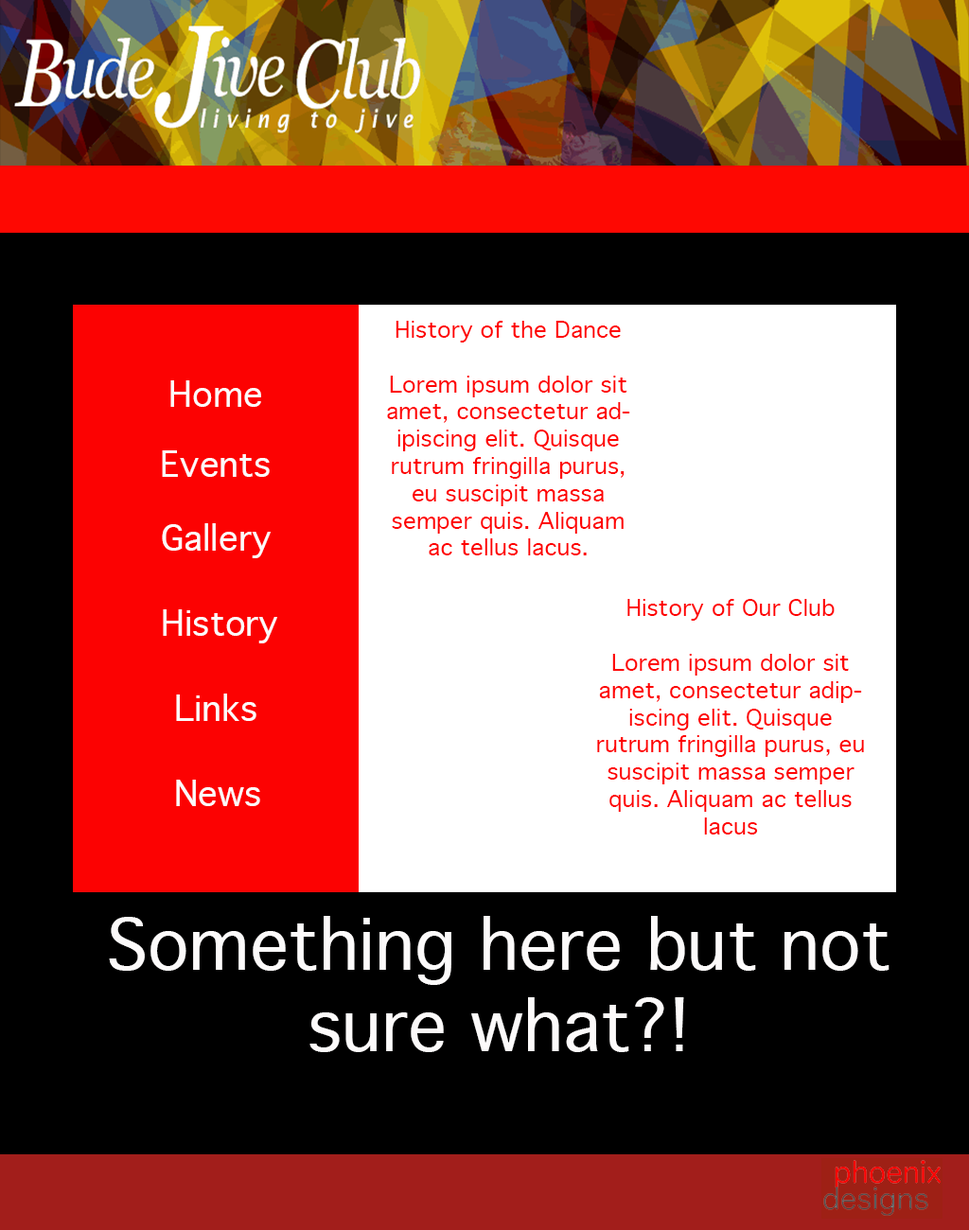
<style>
.page{position:relative;width:969px;height:1230px;background:#000000}
.page>*{position:absolute;margin:0}
.t1{font:22.7px "Geneva";color:#fe0202}
.t2{font:34.1px "Geneva";color:#fcfafa}
.t3{font:68.1px "Geneva";color:#fcfafa}
</style>
<div class="page">
<p class="t1" style="left:387px;top:321px;width:243px;height:235px;text-align:center">History of the Dance<br><br>Lorem ipsum dolor sit amet, consectetur adipiscing elit. Quisque rutrum fringilla purus, eu suscipit massa semper quis. Aliquam ac tellus lacus.</p>
<p class="t2" style="left:170px;top:380px;width:91px;height:27px">Home</p>
<p class="t2" style="left:162px;top:451px;width:108px;height:26px">Events</p>
<p class="t2" style="left:162px;top:523px;width:109px;height:35px">Gallery</p>
<p class="t1" style="left:597px;top:599px;width:267px;height:236px;text-align:center">History of Our Club<br><br>Lorem ipsum dolor sit amet, consectetur adipiscing elit. Quisque rutrum fringilla purus, eu suscipit massa semper quis. Aliquam ac tellus lacus</p>
<p class="t2" style="left:163px;top:610px;width:114px;height:34px">History</p>
<p class="t2" style="left:176px;top:694px;width:80px;height:27px">Links</p>
<p class="t2" style="left:176px;top:780px;width:84px;height:26px">News</p>
<p class="t3" style="left:109px;top:916px;width:781px;height:136px;text-align:center">Something here but not sure what?!</p>
</div>
